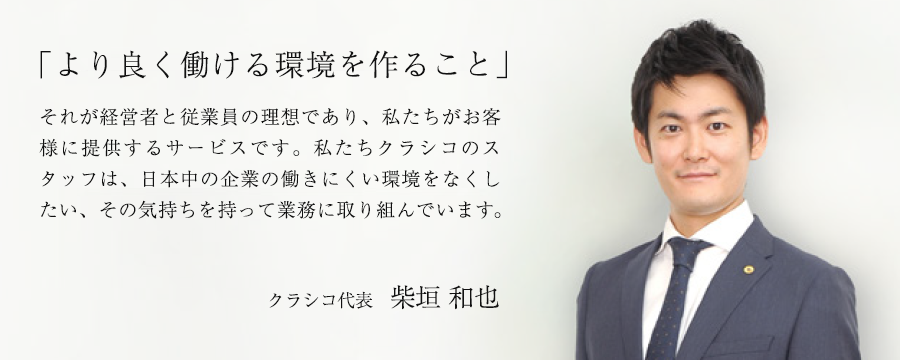
<style>
.page{position:relative;width:900px;height:360px}
.page>*{position:absolute;margin:0}
.t1{font:30px "RyuminPr6N-Light";letter-spacing:0.05em;color:#111111;text-transform:uppercase}
.t2{font:19px/31px "RyuminPr6N-Light";letter-spacing:0.06em;color:#111111;text-transform:uppercase}
.t3{font:19px/31px "RyuminPr6N-Light";letter-spacing:0.11em;color:#111111;text-transform:uppercase}
.t4{font:19px/31px "RyuminPr6N-Light";letter-spacing:0.044em;color:#111111;text-transform:uppercase}
.t5{font:19px/31px "RyuminPr6N-Light";letter-spacing:-0.056em;color:#111111;text-transform:uppercase}
.t6{font:18px "RyuminPr6N-Light";letter-spacing:-0.025em;color:#111111;text-transform:uppercase}
.t7{font:26px "RyuminPr6N-Light";letter-spacing:-0.025em;color:#111111;text-transform:uppercase}
</style>
<div class="page">
<p class="t1" style="left:40px;top:50px;width:467px;height:29px">「より良く働ける環境を作ること」</p>
<p class="t2" style="left:39px;top:108px;width:462px;height:111px">それが経営者と従業員の理想であり、私たちがお客<br><span class="t3">様に提供するサービスです。私たちクラシコのス<br></span>タッフは、日本中の企業の働きにくい環境をなくし<br><span class="t4">たい、その気持ちを持って業務に取り組んでいま</span><span class="t5">す</span><span class="t4">。</span></p>
<p class="t6" style="left:269px;top:285px;width:230px;height:25px">クラシコ代表　<span class="t7">柴垣 和也</span></p>
</div>
